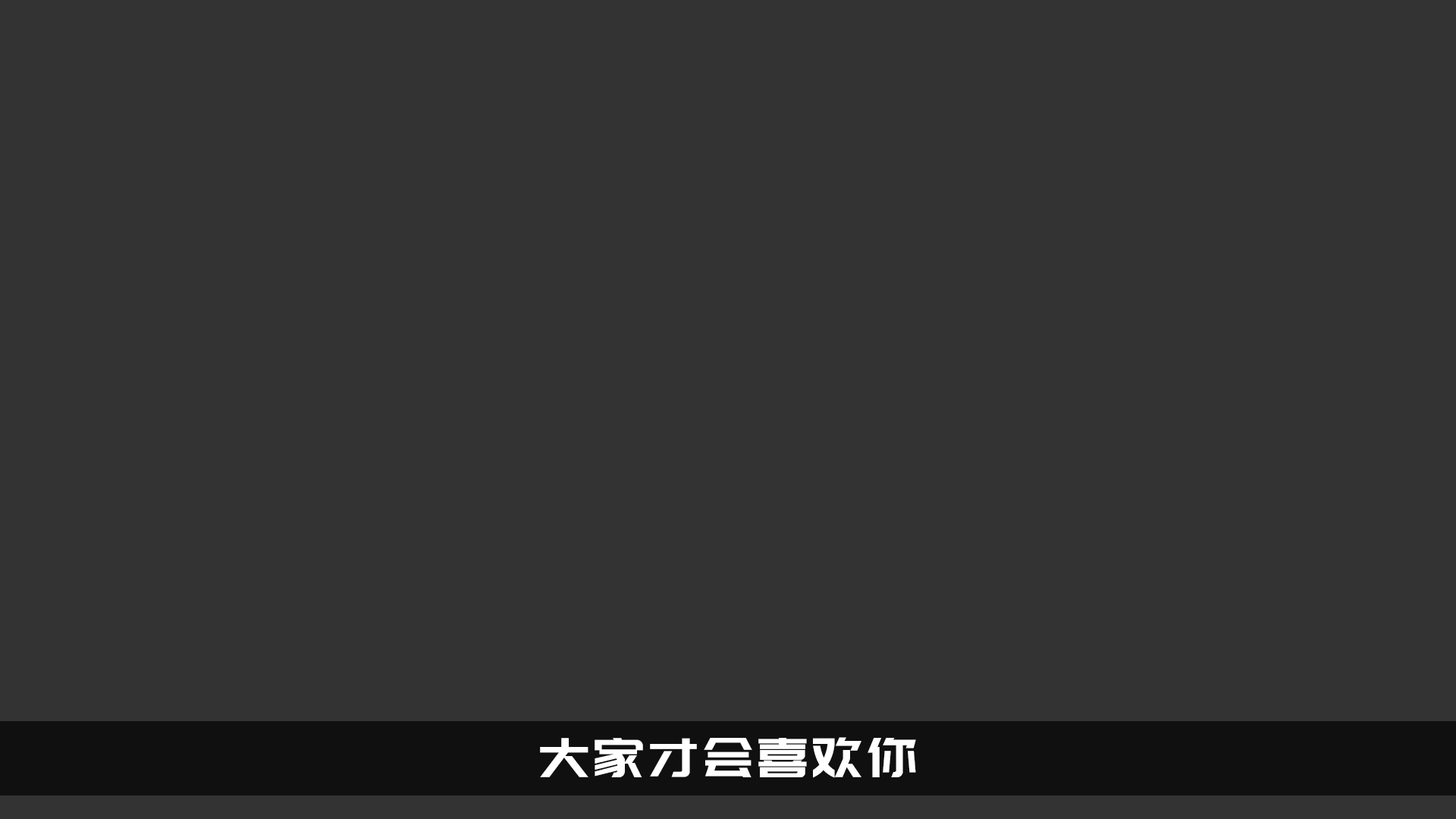
<style>
.page{position:relative;width:1456px;height:819px;background:#333333}
.page>*{position:absolute;margin:0}
.t1{font:54.6px "PangMenZhengDao-3";color:#ffffff}
</style>
<div class="page">
<p class="t1" style="left:540px;top:737px;width:376px;height:41px">大家才会喜欢你</p>
</div>
